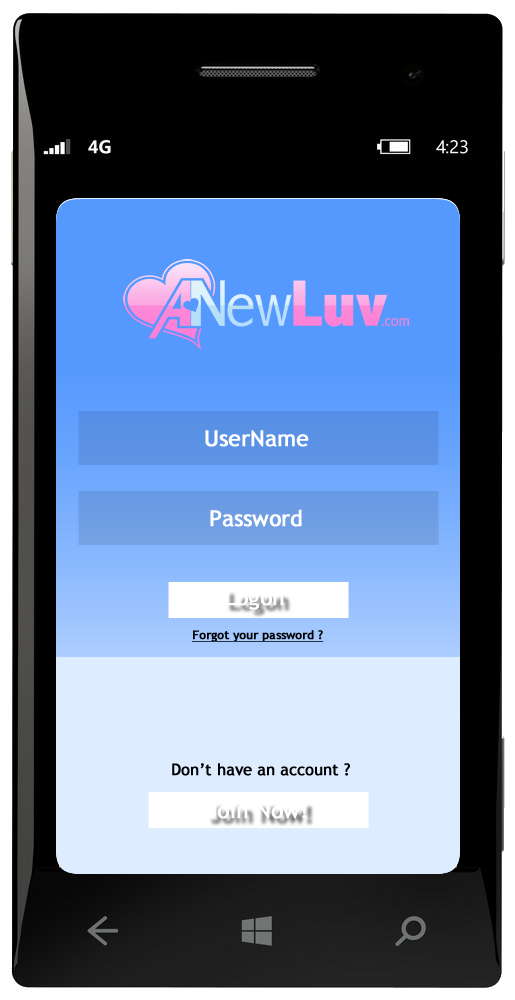
<style>
.page{position:relative;width:515px;height:1000px;background:#000000}
.page>*{position:absolute;margin:0}
.t1{font:22px "TrebuchetMS";color:#ffffff;font-weight:bold}
.t2{font:12px "TrebuchetMS";color:#000000;font-weight:bold;text-decoration:underline}
.t3{font:16px "TrebuchetMS";color:#000000;font-weight:bold}
</style>
<div class="page">
<p class="t1" style="left:205px;top:430px;width:104px;height:17px">UserName</p>
<p class="t1" style="left:210px;top:509px;width:92px;height:18px">Password</p>
<p class="t1" style="left:225px;top:589px;width:59px;height:21px">Logon</p>
<p class="t2" style="left:192px;top:630px;width:132px;height:12px">Forgot your password ?</p>
<p class="t3" style="left:172px;top:763px;width:178px;height:13px">Don’t have an account ?</p>
<p class="t1" style="left:206px;top:802px;width:101px;height:17px">Join Now!</p>
</div>
